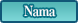
<style>
.page{position:relative;width:78px;height:23px;background:#115777}
.page>*{position:absolute;margin:0}
.t1{font:14px "RyuminPro-ExBold";letter-spacing:-0.08em;color:#ffffff;scale:0.9 1}
</style>
<div class="page">
<p class="t1" style="left:24px;top:5px;width:32px;height:12px">Nama</p>
</div>
